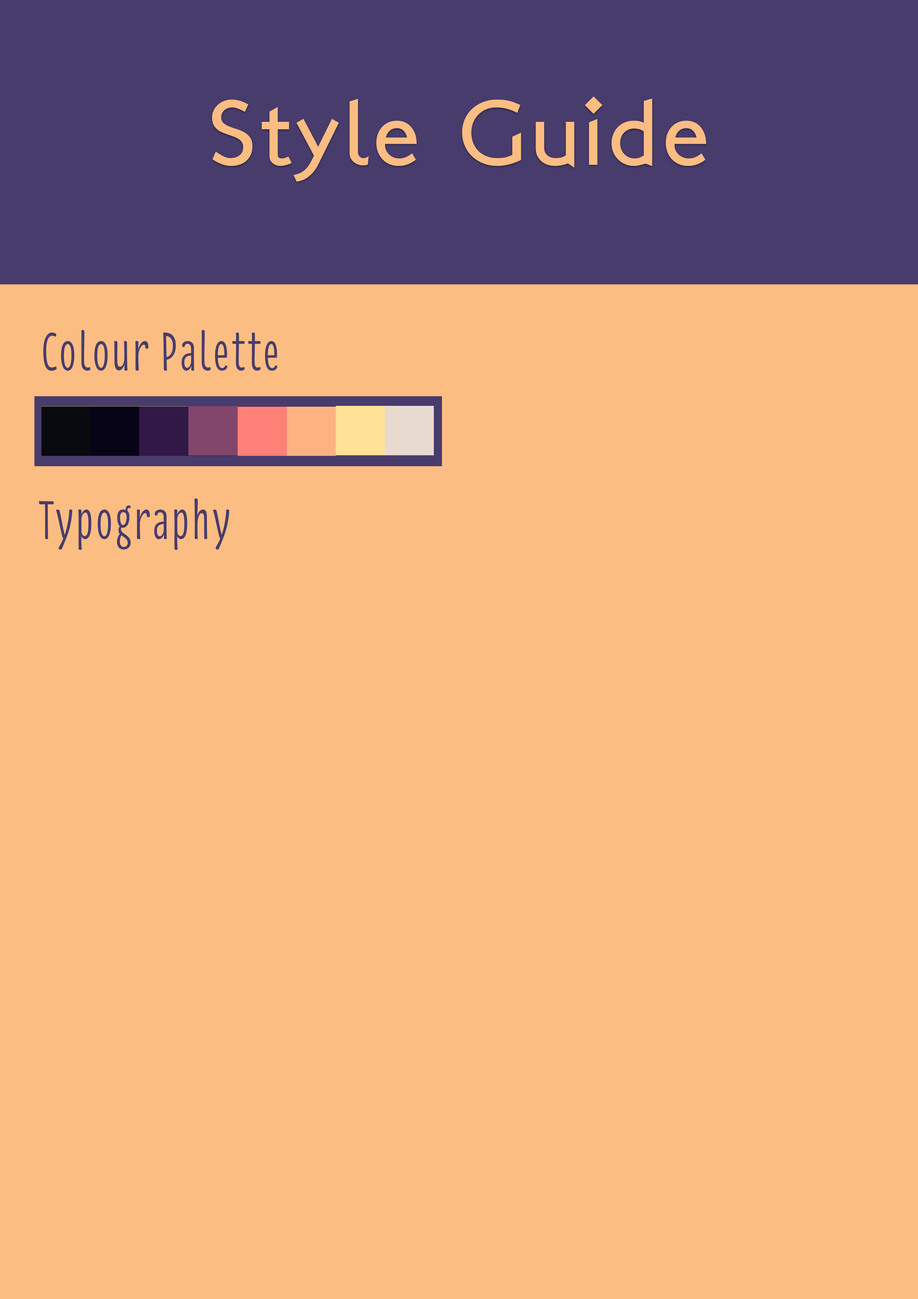
<style>
.page{position:relative;width:918px;height:1299px;background:#fcbd83}
.page>*{position:absolute;margin:0}
.t1{font:92.6px "LondonBetween";letter-spacing:0.05em;color:#fcbd83}
.t2{font:55.5px "Florence-Regular";letter-spacing:0.05em;color:#483c6c}
</style>
<div class="page">
<p class="t1" style="left:212px;top:96px;width:494px;height:86px">Style Guide</p>
<p class="t2" style="left:43px;top:330px;width:234px;height:41px">Colour Palette</p>
<p class="t2" style="left:39px;top:498px;width:191px;height:52px">Typography</p>
</div>
